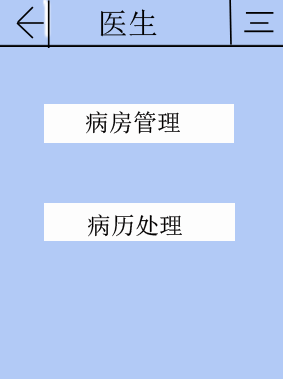
<style>
.page{position:relative;width:283px;height:379px;background:#b2caf6}
.page>*{position:absolute;margin:0}
.t1{font:30.1px "SimSun";color:#000000}
.t2{font:24px "SimSun";color:#020000}
</style>
<div class="page">
<p class="t1" style="left:100px;top:9px;width:57px;height:28px">医生</p>
<p class="t2" style="left:86px;top:111px;width:94px;height:23px">病房管理</p>
<p class="t2" style="left:88px;top:214px;width:94px;height:23px">病历处理</p>
</div>
